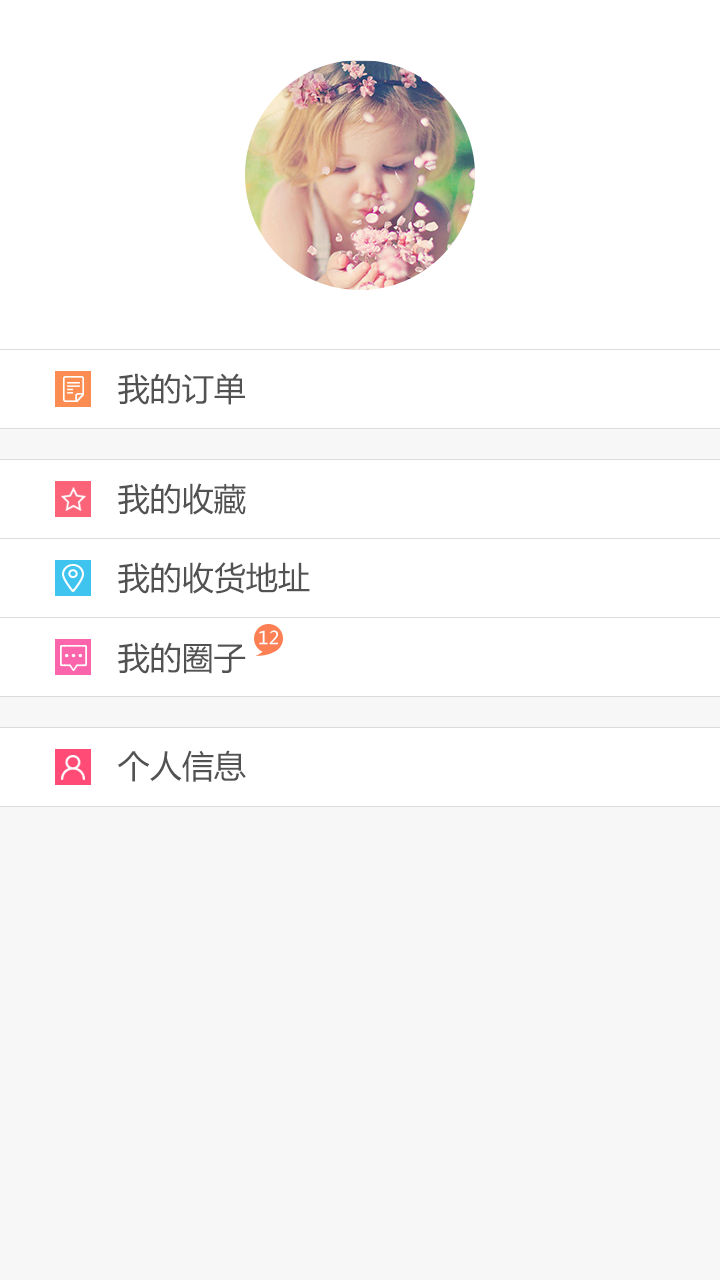
<style>
.page{position:relative;width:720px;height:1280px;background:#ffffff}
.page>*{position:absolute;margin:0}
.t1{font:32px "MicrosoftYaHei";color:#525252}
.t2{font:18px "MicrosoftYaHei";color:#ffffff}
</style>
<div class="page">
<p class="t1" style="left:118px;top:373px;width:127px;height:32px">我的订单</p>
<p class="t1" style="left:118px;top:483px;width:128px;height:32px">我的收藏</p>
<p class="t1" style="left:118px;top:562px;width:192px;height:32px">我的收货地址</p>
<p class="t2" style="left:259px;top:630px;width:19px;height:15px">12</p>
<p class="t1" style="left:118px;top:642px;width:128px;height:32px">我的圈子</p>
<p class="t1" style="left:118px;top:750px;width:128px;height:32px">个人信息</p>
</div>
